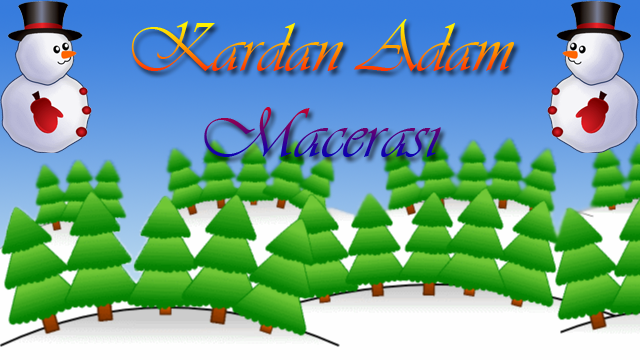
<style>
.page{position:relative;width:640px;height:360px}
.page>*{position:absolute;margin:0}
.t1{font:72px "Vivaldii"}
</style>
<div class="page">
<p class="t1" style="left:131px;top:19px;width:383px;height:139px;text-align:center">Kardan Adam<br>Macerası</p>
</div>
